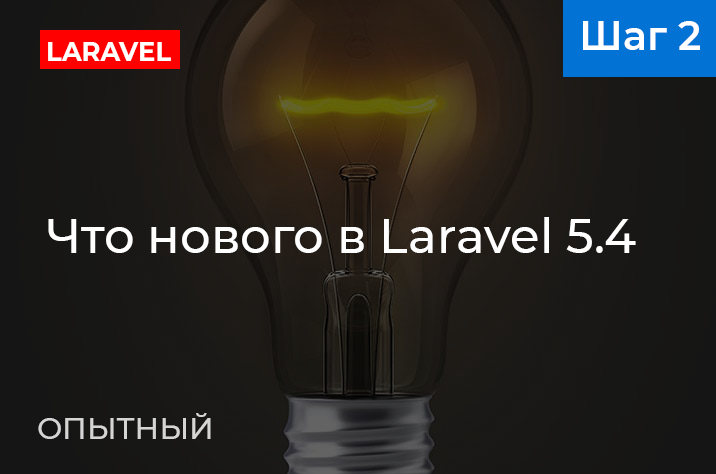
<style>
.page{position:relative;width:716px;height:474px}
.page>*{position:absolute;margin:0}
.t1{font:40px "Montserrat-SemiBold";color:#ffffff}
.t2{font:27px "Montserrat-Bold";color:#ffffff;scale:0.95 1}
.t3{font:48px "Montserrat-Medium";color:#ffffff}
.t4{font:30px "Montserrat-Medium";color:#d5d5d5}
</style>
<div class="page">
<p class="t1" style="left:583px;top:21px;width:117px;height:29px">Шаг 2</p>
<p class="t2" style="left:48px;top:42px;width:123px;height:19px">LARAVEL</p>
<p class="t3" style="left:48px;top:217px;width:588px;height:36px">Что нового в Laravel 5.4</p>
<p class="t4" style="left:38px;top:413px;width:173px;height:26px">ОПЫТНЫЙ</p>
</div>
